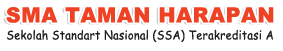
<style>
.page{position:relative;width:283px;height:51px;background:#ffffff}
.page>*{position:absolute;margin:0}
.t1{font:21px "Arial-Black";letter-spacing:0.025em;color:#ef4123}
.t2{font:12.3px "ComicSansMS";letter-spacing:0.025em;color:#212121;scale:0.89 1}
</style>
<div class="page">
<p class="t1" style="left:6px;top:7px;width:268px;height:16px">SMA TAMAN HARAPAN</p>
<p class="t2" style="left:7px;top:29px;width:266px;height:14px">Sekolah Standart Nasional (SSA) Terakreditasi A</p>
</div>
